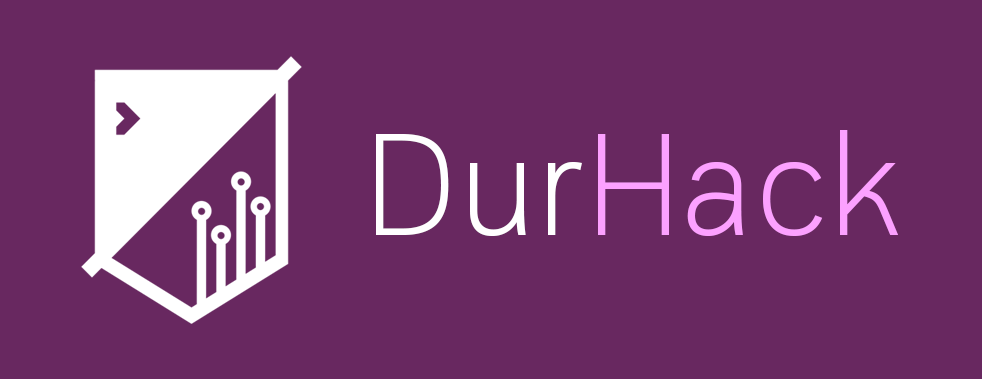
<style>
.page{position:relative;width:982px;height:379px;background:#682860}
.page>*{position:absolute;margin:0}
.t1{font:144px "Cloud-Light";color:#fca1ff}
.t2{font:144px "Cloud-Light";color:#ffffff}
</style>
<div class="page">
<p class="t1" style="left:376px;top:130px;width:523px;height:106px"><span class="t2">Dur</span>Hack</p>
</div>
